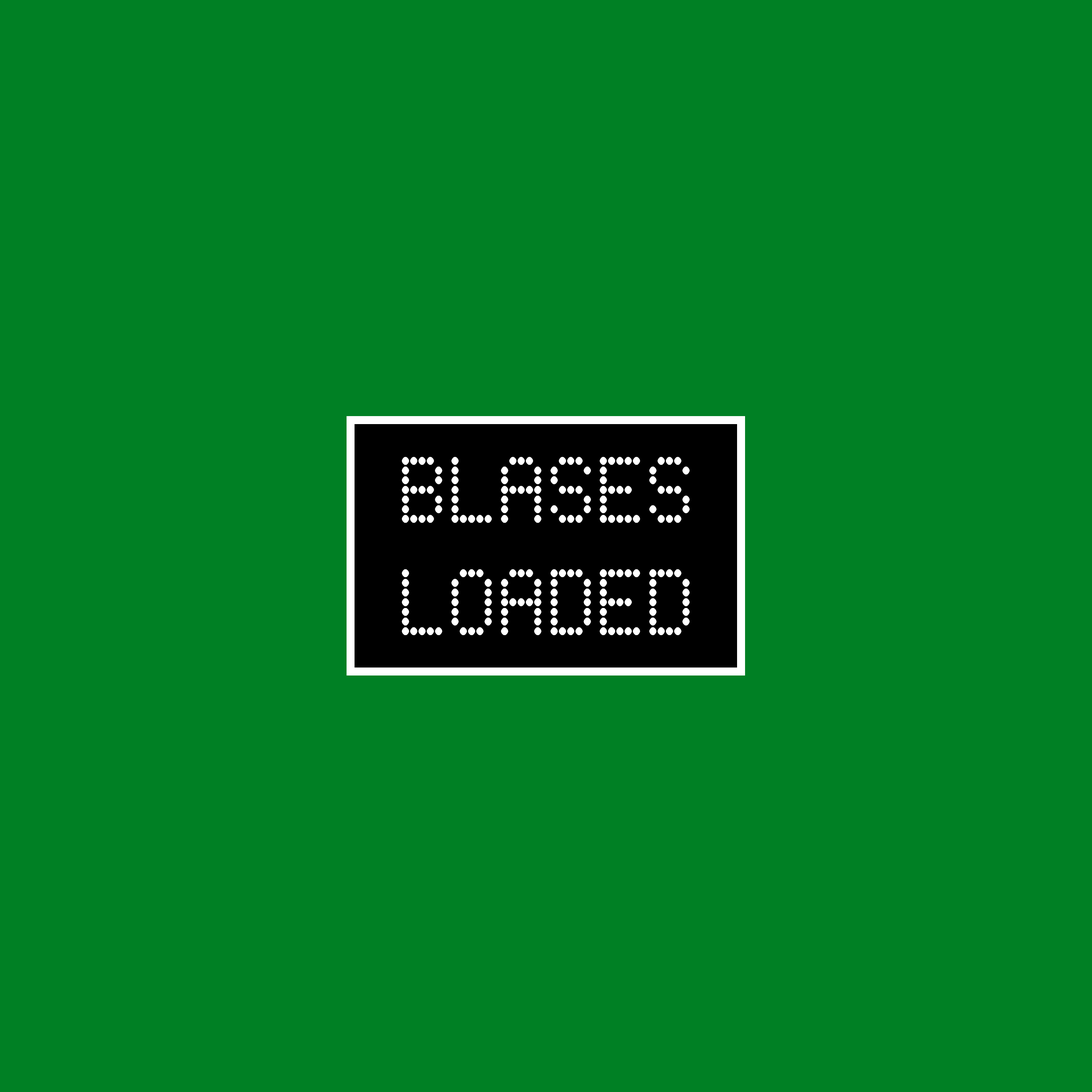
<style>
.page{position:relative;width:1092px;height:1092px;background:#008024}
.page>*{position:absolute;margin:0}
.t1{font:93.5px "ScoreBoard";color:#ffffff}
</style>
<div class="page">
<p class="t1" style="left:402px;top:457px;width:288px;height:178px;text-align:center">Blases<br>Loaded</p>
</div>
